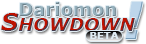
<style>
.page{position:relative;width:146px;height:44px;background:#ffffff}
.page>*{position:absolute;margin:0}
.t1{font:18px "Verdana-Bold";color:#96b1bd}
.t2{font:52px "Arial-Black";color:#bdd6eb;font-style:italic}
.t3{font:18px "Verdana-BoldItalic"}
.t4{font:24px "Verdana-BoldItalic"}
.t5{font:10px "Verdana-Bold";color:#e0ecf3}
</style>
<div class="page">
<p class="t1" style="left:20px;top:2px;width:96px;height:14px">Dariomon</p>
<p class="t2" style="left:125px;top:1px;width:18px;height:38px">!</p>
<p class="t3" style="left:1px;top:13px;width:134px;height:18px"><span class="t4">S</span>HOWDOWN</p>
<p class="t5" style="left:90px;top:32px;width:29px;height:7px">BETA</p>
</div>
